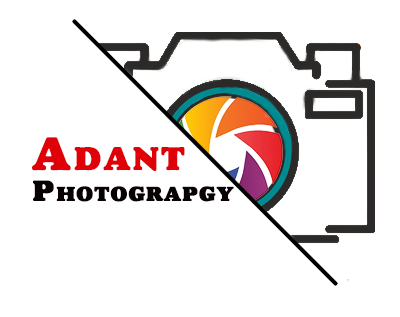
<style>
.page{position:relative;width:400px;height:317px;background:#ffffff}
.page>*{position:absolute;margin:0}
.t1{font:48px "AlfredoHeavy";letter-spacing:0.05em;color:#e00008;font-variant:small-caps;font-weight:bold}
.t2{font:30px "AlfredoHeavy";letter-spacing:0.05em;color:#070005;font-variant:small-caps;font-weight:bold}
</style>
<div class="page">
<p class="t1" style="left:32px;top:137px;width:153px;height:34px">Adant</p>
<p class="t2" style="left:33px;top:180px;width:201px;height:22px">Photograpgy</p>
</div>
